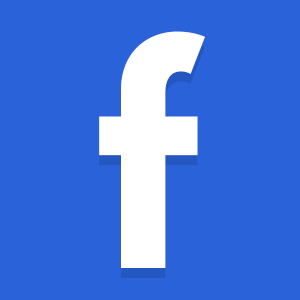
<style>
.page{position:relative;width:300px;height:300px;background:#2a63d9}
.page>*{position:absolute;margin:0}
.t1{font:310.2px "Edmondsans-Bold";color:#ffffff}
</style>
<div class="page">
<p class="t1" style="left:99px;top:31px;width:106px;height:237px">f</p>
</div>
